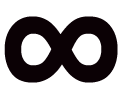
<style>
.page{position:relative;width:128px;height:100px;background:#ffffff}
.page>*{position:absolute;margin:0}
.t1{font:166px "Helvetica-Bold";color:#0b0105}
</style>
<div class="page">
<p class="t1" style="left:4px;top:16px;width:114px;height:67px">∞</p>
</div>
